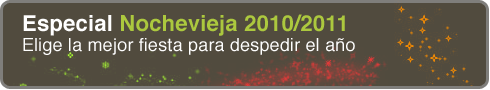
<style>
.page{position:relative;width:490px;height:90px;background:#514b3e}
.page>*{position:absolute;margin:0}
.t1{font:18px/20px "Helvetica";letter-spacing:0.01em;color:#ffffff}
.t2{font:22px/20px "Helvetica-Bold";letter-spacing:0.01em;color:#ffffff}
.t3{font:22px/20px "Helvetica-Bold";letter-spacing:0.01em;color:#acc83e}
</style>
<div class="page">
<p class="t1" style="left:23px;top:14px;width:332px;height:41px"><span class="t2">Especial </span><span class="t3">Nochevieja 2010/2011<br></span>Elige la mejor fiesta para despedir el año</p>
</div>
